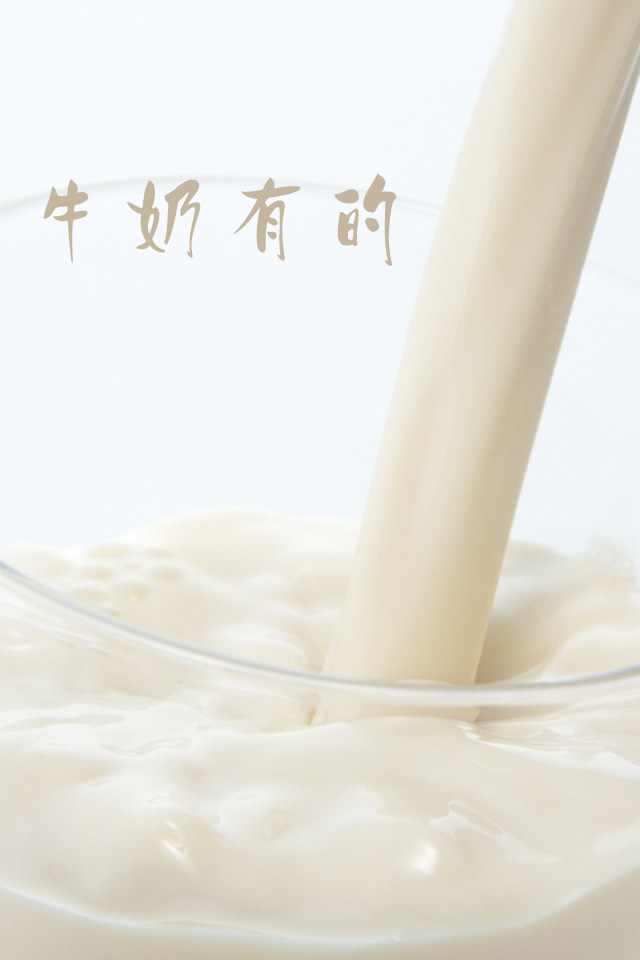
<style>
.page{position:relative;width:640px;height:960px}
.page>*{position:absolute;margin:0}
.t1{font:100px "¾­µä·±ÖÐ±ä Regular";color:#c5b69f}
</style>
<div class="page">
<p class="t1" style="left:43px;top:173px;width:354px;height:93px">牛奶有的</p>
</div>
